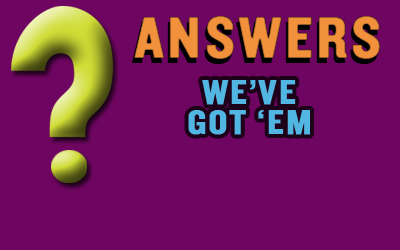
<style>
.page{position:relative;width:400px;height:250px;background:#6e0561}
.page>*{position:absolute;margin:0}
.t1{font:60px "Knockout-HTF50-Welterweight";letter-spacing:0.05em;color:#f1913b;text-transform:uppercase;font-weight:bold}
.t2{font:36px/30px "Knockout-HTF50-Welterweight";letter-spacing:0.05em;color:#51b6e2;text-transform:uppercase;font-weight:bold}
</style>
<div class="page">
<p class="t1" style="left:134px;top:16px;width:246px;height:43px">Answers</p>
<p class="t2" style="left:188px;top:80px;width:122px;height:55px;text-align:center">We’ve<br>Got ‘em</p>
</div>
